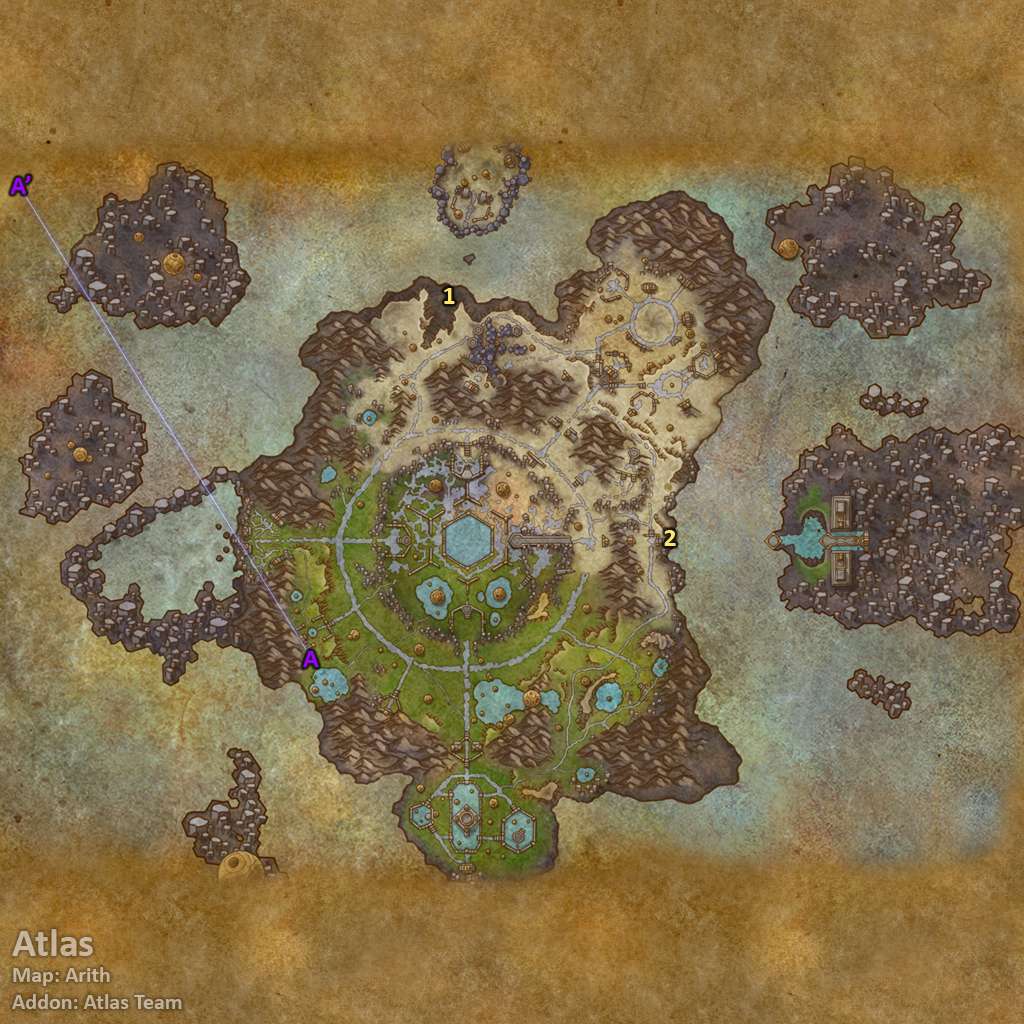
<style>
.page{position:relative;width:1024px;height:1024px}
.page>*{position:absolute;margin:0}
.t1{font:26px "Calibri-Bold";color:#9900ff}
.t2{font:26px "Calibri-Bold";color:#fee570}
.t3{font:22px "Calibri-Bold";color:#c4b39b}
.t4{font:40px "Calibri-Bold";color:#c4b39b}
</style>
<div class="page">
<p class="t1" style="left:10px;top:176px;width:21px;height:18px">A’</p>
<p class="t2" style="left:444px;top:288px;width:11px;height:16px">1</p>
<p class="t2" style="left:664px;top:530px;width:12px;height:16px">2</p>
<p class="t1" style="left:303px;top:651px;width:16px;height:16px">A</p>
<p class="t3" style="left:12px;top:929px;width:170px;height:80px"><span class="t4">Atlas<br></span>Map: Arith<br>Addon: Atlas Team</p>
</div>
